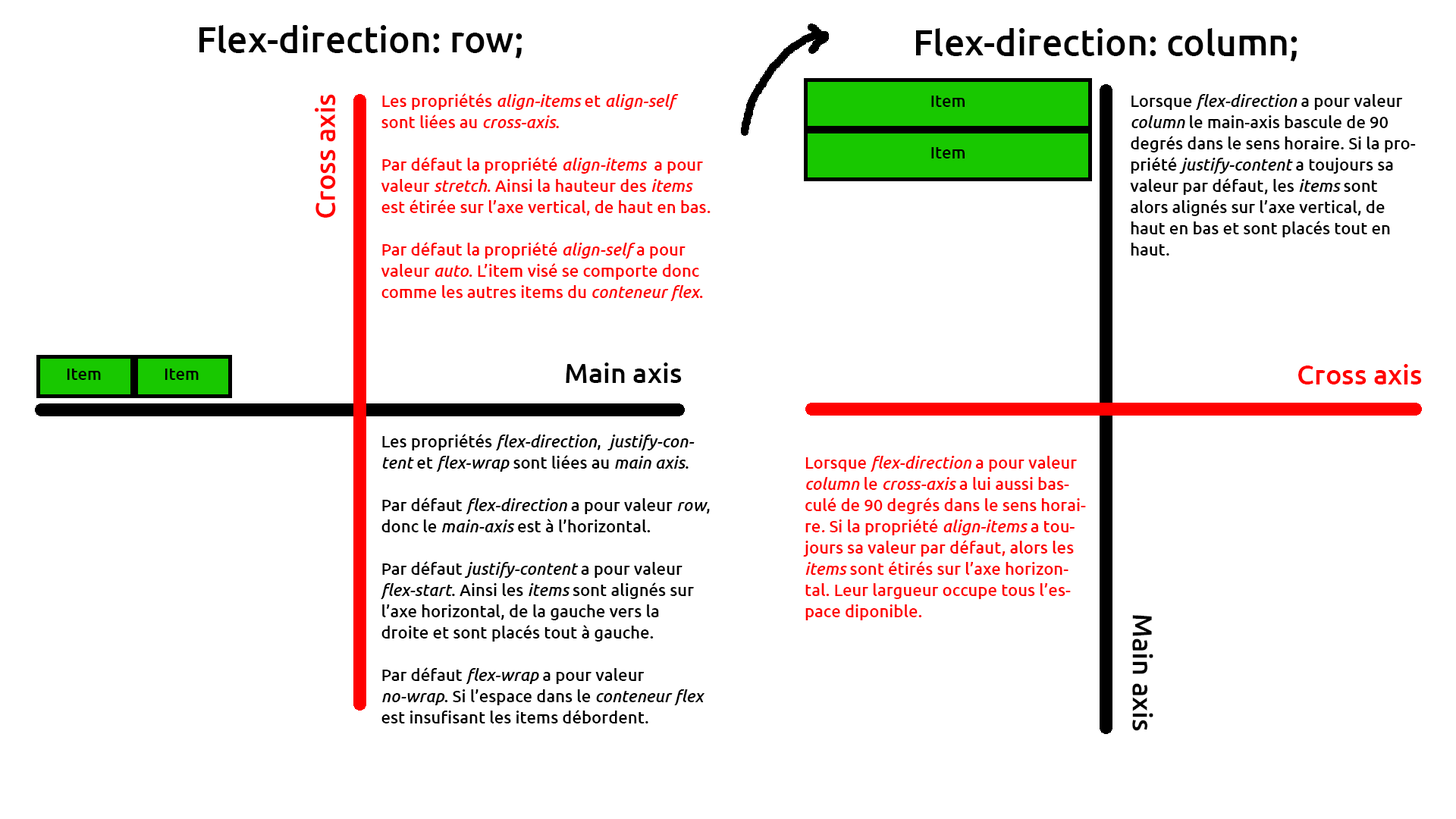
<style>
.page{position:relative;width:1456px;height:819px;background:#ffffff}
.page>*{position:absolute;margin:0}
.t1{font:36.4px "Ubuntu-Medium";color:#000000}
.t2{font:27.3px "Ubuntu-Medium";color:#ff0000}
.t3{font:16.7px/21.2px "Ubuntu-Medium";color:#fe0101}
.t4{font:16.7px/21.2px "Ubuntu-MediumItalic";color:#fe0101}
.t5{font:16.7px/21.2px "Ubuntu-Medium";color:#000000}
.t6{font:16.7px/21.2px "Ubuntu-MediumItalic";color:#000000}
.t7{font:27.3px "Ubuntu-Medium";color:#000000}
</style>
<div class="page">
<p class="t1" style="left:199px;top:25px;width:323px;height:33px">Flex-direction: row;</p>
<p class="t1" style="left:916px;top:28px;width:381px;height:33px">Flex-direction: column;</p>
<p class="t2" style="left:315px;top:94px;width:21px;height:124px;rotate:-90deg">Cross axis</p>
<p class="t3" style="left:381px;top:93px;width:330px;height:208px">Les propriétés <span class="t4">align-items</span> et <span class="t4">align-self</span> sont liées au <span class="t4">cross-axis</span>.<br><br>Par défaut la propriété <span class="t4">align-items</span>  a pour valeur <span class="t4">stretch</span>. Ainsi la hauteur des <span class="t4">items</span> est étirée sur l’axe vertical, de haut en bas. <br><br>Par défaut la propriété <span class="t4">align-self </span>a pour valeur <span class="t4">auto</span>. L’item visé se comporte donc comme les autres items du <span class="t4">conteneur flex</span>.</p>
<p class="t5" style="left:1130px;top:94px;width:286px;height:162px">Lorsque <span class="t6">flex-direction </span>a pour valeur<span class="t6"> column</span> le main-axis bascule de 90 degrés dans le sens horaire. Si la propriété <span class="t6">justify-content</span> a toujours sa valeur par défaut, les <span class="t6">items</span> sont alors alignés sur l’axe vertical, de  haut en bas et sont placés tout en haut.</p>
<p class="t7" style="left:566px;top:362px;width:116px;height:21px">Main axis</p>
<p class="t2" style="left:1298px;top:364px;width:124px;height:20px">Cross axis</p>
<p class="t5" style="left:381px;top:434px;width:329px;height:289px">Les propriétés <span class="t6">flex-direction</span>,  <span class="t6">justify-content</span> et <span class="t6">flex-wrap</span> sont liées au <span class="t6">main axis</span>.<br><br>Par défaut <span class="t6">flex-direction</span> a pour valeur <span class="t6">row</span>, donc le <span class="t6">main-axis</span> est à l’horizontal.<br><br>Par défaut <span class="t6">justify-content</span> a pour valeur <span class="t6">flex-start</span>. Ainsi les <span class="t6">items</span> sont alignés sur l’axe horizontal, de la gauche vers la droite et sont placés tout à gauche.<br><br>Par défaut <span class="t6">flex-wrap</span> a pour valeur <span class="t6">no-wrap</span>. Si l’espace dans le <span class="t6">conteneur flex</span> est insufisant les items débordent.</p>
<p class="t3" style="left:803px;top:456px;width:283px;height:164px">Lorsque <span class="t4">flex-direction</span> a pour valeur <span class="t4">column </span>le<span class="t4"> cross-axis </span>a lui aussi basculé de 90 degrés dans le sens horaire<span class="t4">. </span>Si la propriété <span class="t4">align-items</span> a toujours sa valeur par défaut, alors les <span class="t4">items</span> sont étirés sur l’axe horizontal. Leur largueur occupe tous l’espace diponible.</p>
<p class="t7" style="left:1132px;top:615px;width:21px;height:116px;rotate:90deg">Main axis</p>
</div>
